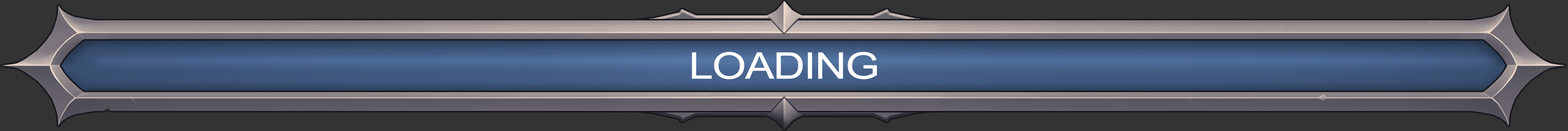
<style>
.page{position:relative;width:1568px;height:131px;background:#333333}
.page>*{position:absolute;margin:0}
.t1{font:36.5px "ArialMT";letter-spacing:-0.025em;color:#ffffff;scale:1.2 1}
</style>
<div class="page">
<p class="t1" style="left:692px;top:52px;width:185px;height:27px">LOADING</p>
</div>
